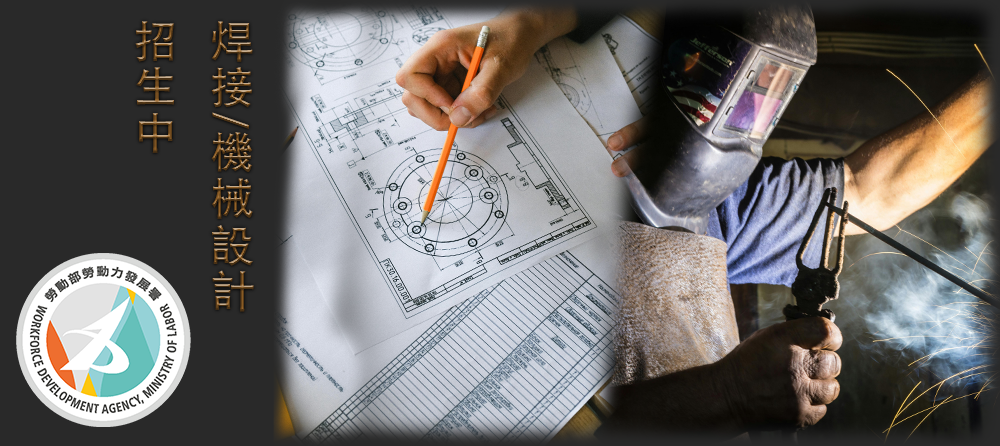
<style>
.page{position:relative;width:1000px;height:446px}
.page>*{position:absolute;margin:0}
.t1{font:44.2px "AdobeHeitiStd-Regular";letter-spacing:0.05em}
</style>
<div class="page">
<p class="t1" style="left:135px;top:21px;width:119px;height:291px">焊接/機械設計 招生中</p>
</div>
